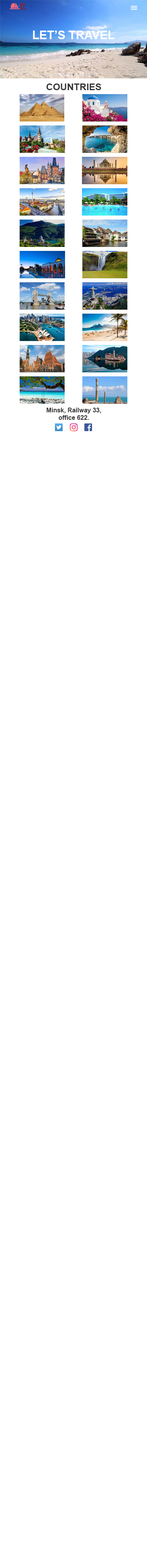
<style>
.page{position:relative;width:147px;height:1568px;background:#ffffff}
.page>*{position:absolute;margin:0}
.t1{font:11.8px "Arial-BoldMT";color:#ffffff}
.t2{font:9.4px "Arial-BoldMT";color:#353535}
.t3{font:6.3px "Arial-BoldMT";color:#353535}
</style>
<div class="page">
<p class="t1" style="left:33px;top:31px;width:81px;height:8px">LET’S TRAVEL</p>
<p class="t2" style="left:46px;top:83px;width:55px;height:7px">COUNTRIES</p>
<p class="t3" style="left:47px;top:408px;width:54px;height:12px;text-align:center">Minsk, Railway 33,<br>office 622.</p>
</div>
